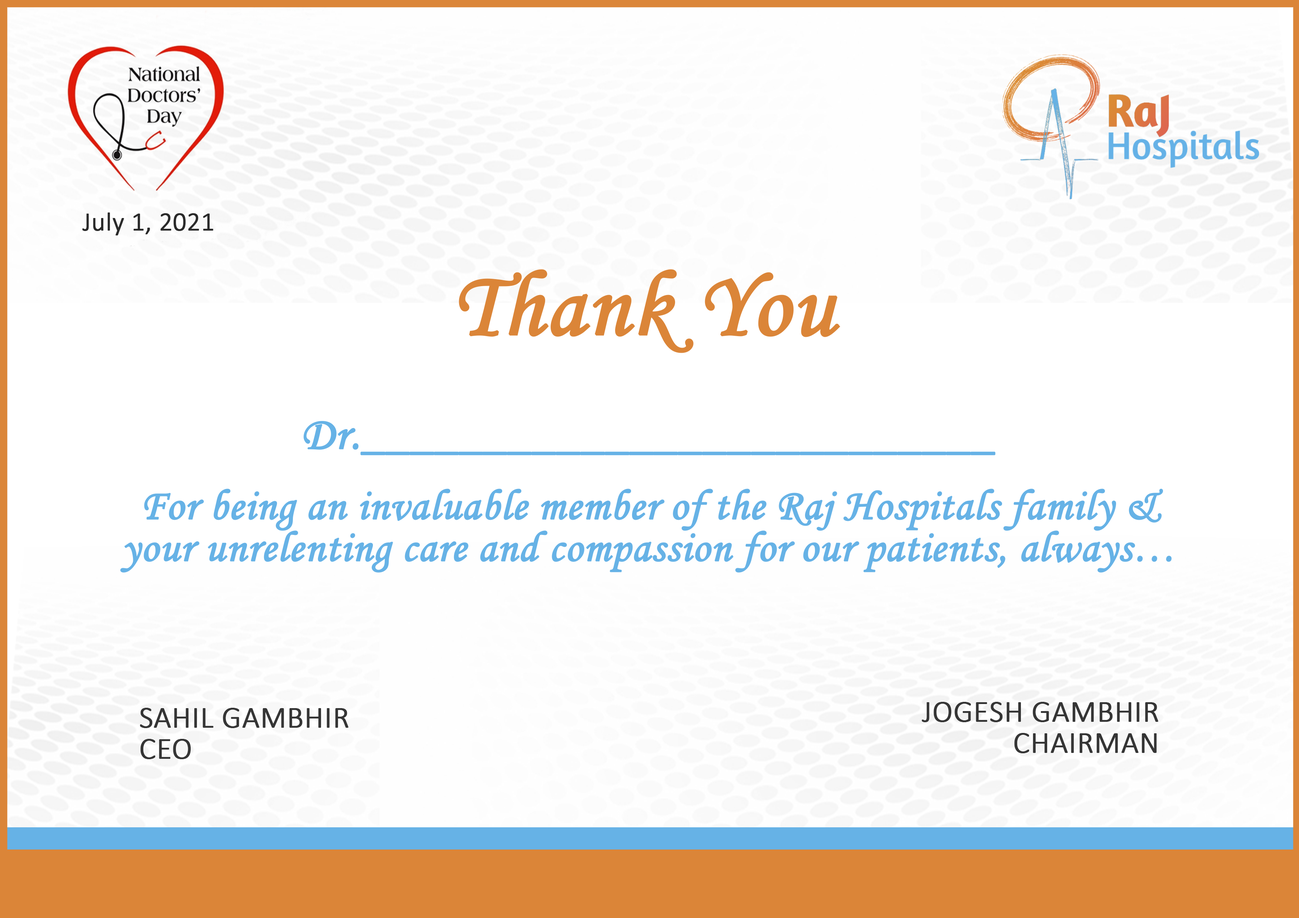
<style>
.page{position:relative;width:1299px;height:918px;background:#ffffff}
.page>*{position:absolute;margin:0}
.t1{font:26.2px "Calibri-Light";color:#2a2a2a;font-weight:bold}
.t2{font:92.6px "MonotypeCorsiva";color:#db8538;font-weight:bold}
.t3{font:46.3px "MonotypeCorsiva";color:#66b2e6;font-weight:bold}
.t4{font:43.2px/41.6px "MonotypeCorsiva";color:#66b2e6;font-weight:bold}
.t5{font:30.9px/30.9px "Calibri-Light";color:#353535;font-weight:bold}
</style>
<div class="page">
<p class="t1" style="left:82px;top:213px;width:131px;height:22px">July 1, 2021</p>
<p class="t2" style="left:459px;top:269px;width:381px;height:84px">Thank You</p>
<p class="t3" style="left:303px;top:421px;width:692px;height:34px">Dr.__________________________</p>
<p class="t4" style="left:120px;top:489px;width:1051px;height:84px;text-align:center">For being an invaluable member of the Raj Hospitals family &amp;<br>your unrelenting care and compassion for our patients, always…</p>
<p class="t5" style="left:921px;top:702px;width:237px;height:51px;text-align:right">JOGESH GAMBHIR<br>CHAIRMAN</p>
<p class="t5" style="left:140px;top:708px;width:208px;height:51px">SAHIL GAMBHIR<br>CEO</p>
</div>
